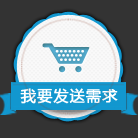
<style>
.page{position:relative;width:138px;height:138px;background:#333333}
.page>*{position:absolute;margin:0}
.t1{font:15.1px "MicrosoftYaHei";letter-spacing:0.05em;color:#ffffff;font-weight:bold}
</style>
<div class="page">
<p class="t1" style="left:20px;top:88px;width:98px;height:16px">我要发送需求</p>
</div>
